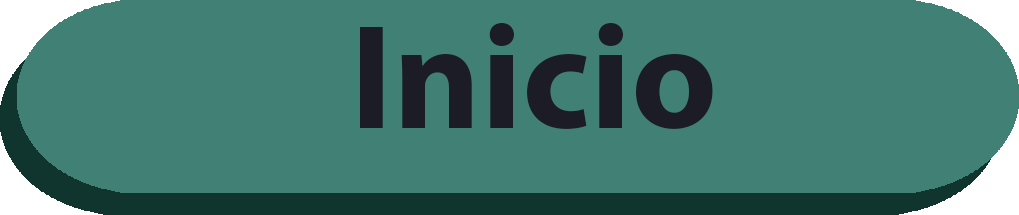
<style>
.page{position:relative;width:1019px;height:215px;background:#418075}
.page>*{position:absolute;margin:0}
.t1{font:150px "MyriadPro-Bold";color:#1b1c25}
</style>
<div class="page">
<p class="t1" style="left:360px;top:23px;width:353px;height:106px">Inicio</p>
</div>
